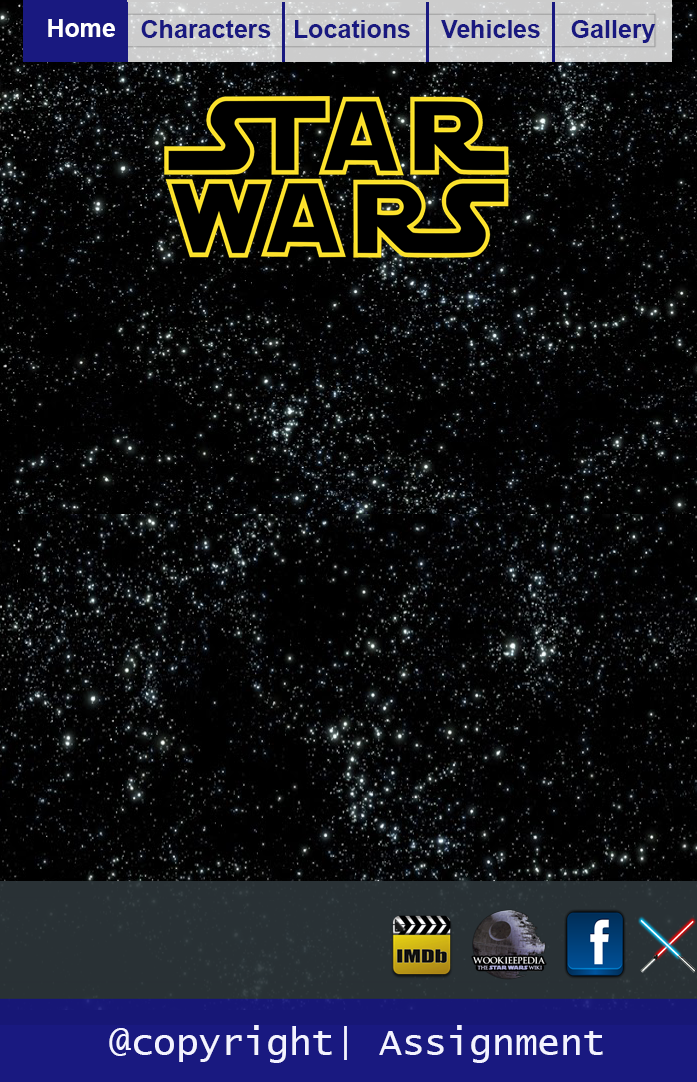
<style>
.page{position:relative;width:697px;height:1082px}
.page>*{position:absolute;margin:0}
.t1{font:25px "Arial-BoldMT";color:#ffffff}
.t2{font:25px "Arial-BoldMT";color:#191980}
.t3{font:37.5px "LucidaConsole";color:#f3f3ff}
</style>
<div class="page">
<p class="t1" style="left:48px;top:19px;width:67px;height:18px">Home</p>
<p class="t2" style="left:141px;top:20px;width:130px;height:18px">Characters</p>
<p class="t2" style="left:295px;top:20px;width:115px;height:18px">Locations</p>
<p class="t2" style="left:441px;top:20px;width:99px;height:18px">Vehicles</p>
<p class="t2" style="left:571px;top:20px;width:85px;height:23px">Gallery</p>
<p class="t3" style="left:109px;top:1025px;width:494px;height:38px">@copyright| Assignment</p>
</div>
